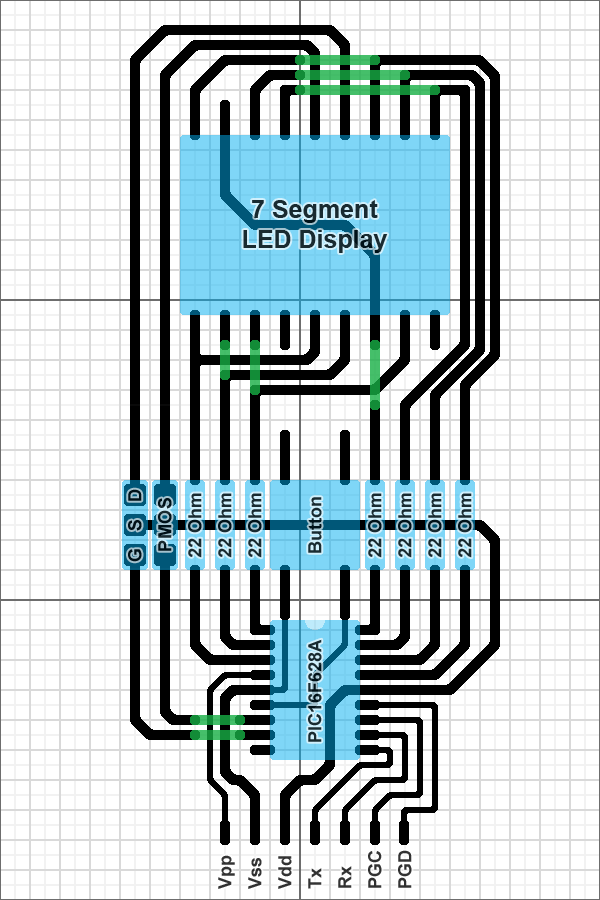
<style>
.page{position:relative;width:600px;height:900px;background:#ffffff}
.page>*{position:absolute;margin:0}
.t1{font:25px "Arial-BoldMT";color:#192b31}
.t2{font:18px "Arial-BoldMT";letter-spacing:0.03em;color:#000000}
.t3{font:18px "Arial-BoldMT";color:#182a30}
.t4{font:18px "Arial-BoldMT";color:#192b31}
.t5{font:18px/15px "Arial-BoldMT";color:#333333}
</style>
<div class="page">
<p class="t1" style="left:243px;top:200px;width:145px;height:53px;text-align:center">7 Segment<br>LED Display</p>
<p class="t2" style="left:128px;top:489px;width:14px;height:73px;rotate:-90deg;opacity:0.8">G   S   D</p>
<p class="t3" style="left:188px;top:493px;width:14px;height:65px;rotate:-90deg">22 Ohm</p>
<p class="t3" style="left:218px;top:493px;width:14px;height:65px;rotate:-90deg">22 Ohm</p>
<p class="t3" style="left:248px;top:493px;width:14px;height:65px;rotate:-90deg">22 Ohm</p>
<p class="t4" style="left:308px;top:497px;width:14px;height:56px;rotate:-90deg">Button</p>
<p class="t3" style="left:368px;top:493px;width:14px;height:65px;rotate:-90deg">22 Ohm</p>
<p class="t3" style="left:398px;top:493px;width:14px;height:65px;rotate:-90deg">22 Ohm</p>
<p class="t3" style="left:428px;top:493px;width:14px;height:65px;rotate:-90deg">22 Ohm</p>
<p class="t3" style="left:458px;top:493px;width:14px;height:65px;rotate:-90deg">22 Ohm</p>
<p class="t2" style="left:158px;top:498px;width:14px;height:53px;rotate:-90deg;opacity:0.8">PMOS</p>
<p class="t4" style="left:308px;top:639px;width:14px;height:103px;rotate:-90deg">PIC16F628A</p>
<p class="t5" style="left:218px;top:850px;width:194px;height:39px;rotate:-90deg">Vpp<br><br>Vss<br><br>Vdd<br><br>Tx<br><br>Rx<br><br>PGC<br><br>PGD</p>
</div>
